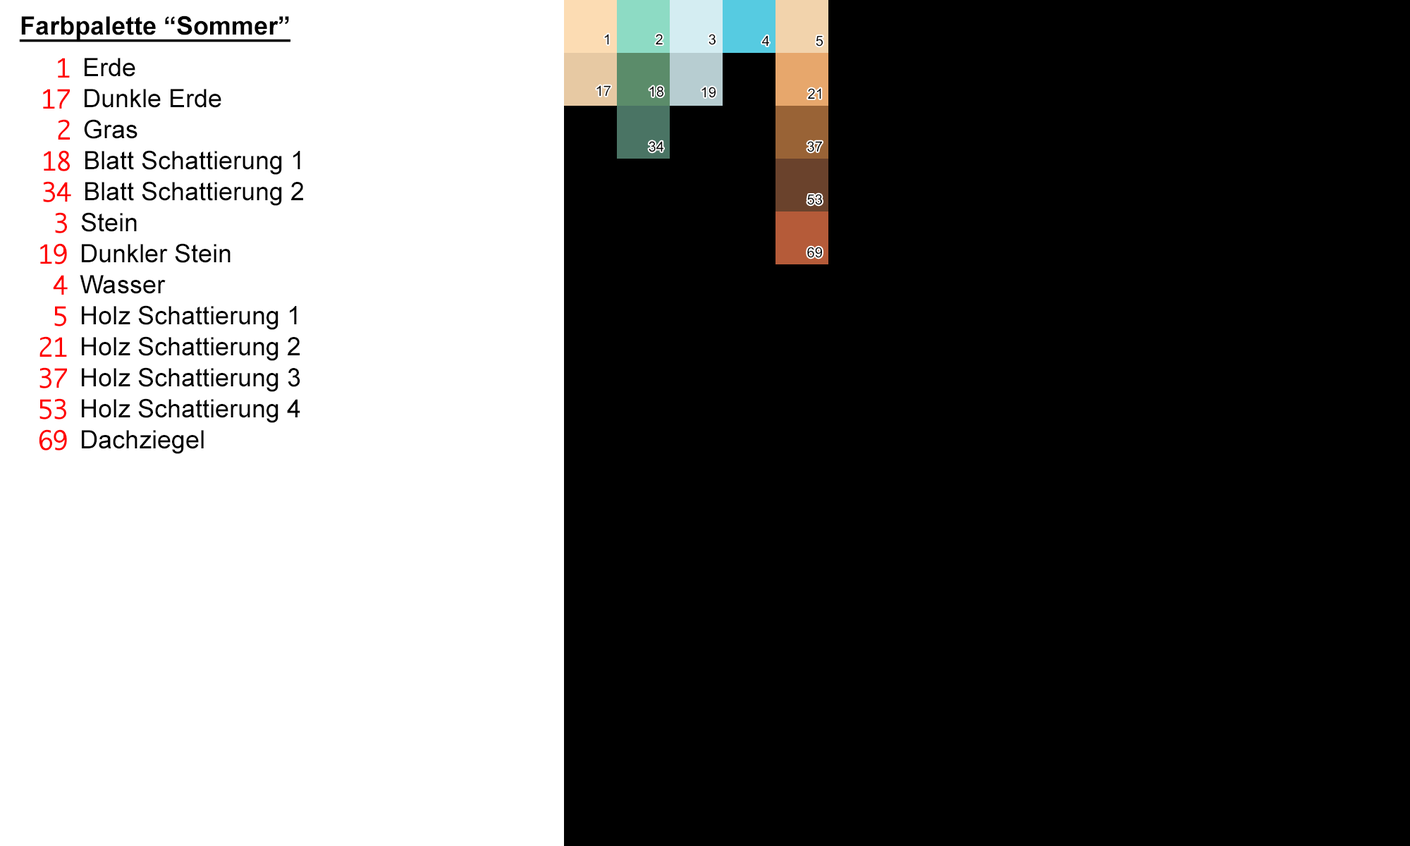
<style>
.page{position:relative;width:1410px;height:846px;background:#000000}
.page>*{position:absolute;margin:0}
.t1{font:25.4px "Arial-BoldMT";color:#000000;text-decoration:underline}
.t2{font:14.1px "ArialMT";color:#000000;text-transform:uppercase}
.t3{font:25.4px "Monaco";color:#ff0000}
.t4{font:25.4px "ArialMT";color:#000000}
</style>
<div class="page">
<p class="t1" style="left:19px;top:16px;width:271px;height:26px">Farbpalette “Sommer”</p>
<p class="t2" style="left:604px;top:34px;width:5px;height:10px">1</p>
<p class="t2" style="left:656px;top:34px;width:7px;height:10px">2</p>
<p class="t2" style="left:708px;top:34px;width:7px;height:11px">3</p>
<p class="t2" style="left:762px;top:35px;width:7px;height:11px">4</p>
<p class="t2" style="left:816px;top:36px;width:7px;height:11px">5</p>
<p class="t3" style="left:58px;top:58px;width:12px;height:20px">1</p>
<p class="t4" style="left:85px;top:58px;width:50px;height:19px">Erde</p>
<p class="t3" style="left:43px;top:89px;width:27px;height:20px">17</p>
<p class="t4" style="left:85px;top:89px;width:136px;height:19px">Dunkle Erde</p>
<p class="t2" style="left:596px;top:85px;width:14px;height:11px">17</p>
<p class="t2" style="left:649px;top:86px;width:14px;height:11px">18</p>
<p class="t2" style="left:701px;top:87px;width:14px;height:11px">19</p>
<p class="t2" style="left:808px;top:88px;width:13px;height:11px">21</p>
<p class="t3" style="left:58px;top:119px;width:12px;height:21px">2</p>
<p class="t4" style="left:84px;top:119px;width:53px;height:20px">Gras</p>
<p class="t2" style="left:648px;top:141px;width:15px;height:11px">34</p>
<p class="t2" style="left:807px;top:141px;width:15px;height:11px">37</p>
<p class="t3" style="left:44px;top:150px;width:26px;height:21px">18</p>
<p class="t4" style="left:85px;top:150px;width:215px;height:25px">Blatt Schattierung 1</p>
<p class="t3" style="left:43px;top:181px;width:28px;height:21px">34</p>
<p class="t4" style="left:85px;top:181px;width:218px;height:25px">Blatt Schattierung 2</p>
<p class="t2" style="left:807px;top:194px;width:15px;height:11px">53</p>
<p class="t3" style="left:55px;top:212px;width:12px;height:21px">3</p>
<p class="t4" style="left:81px;top:212px;width:56px;height:20px">Stein</p>
<p class="t3" style="left:40px;top:243px;width:27px;height:21px">19</p>
<p class="t4" style="left:82px;top:243px;width:148px;height:20px">Dunkler Stein</p>
<p class="t2" style="left:807px;top:247px;width:15px;height:11px">69</p>
<p class="t3" style="left:53px;top:275px;width:15px;height:20px">4</p>
<p class="t4" style="left:80px;top:275px;width:86px;height:19px">Wasser</p>
<p class="t3" style="left:54px;top:306px;width:12px;height:20px">5</p>
<p class="t4" style="left:82px;top:305px;width:215px;height:25px">Holz Schattierung 1</p>
<p class="t3" style="left:39px;top:336px;width:28px;height:21px">21</p>
<p class="t4" style="left:82px;top:336px;width:218px;height:25px">Holz Schattierung 2</p>
<p class="t3" style="left:39px;top:367px;width:28px;height:21px">37</p>
<p class="t4" style="left:82px;top:367px;width:218px;height:25px">Holz Schattierung 3</p>
<p class="t3" style="left:39px;top:398px;width:27px;height:21px">53</p>
<p class="t4" style="left:82px;top:398px;width:218px;height:25px">Holz Schattierung 4</p>
<p class="t3" style="left:39px;top:429px;width:28px;height:21px">69</p>
<p class="t4" style="left:82px;top:430px;width:122px;height:24px">Dachziegel</p>
</div>
